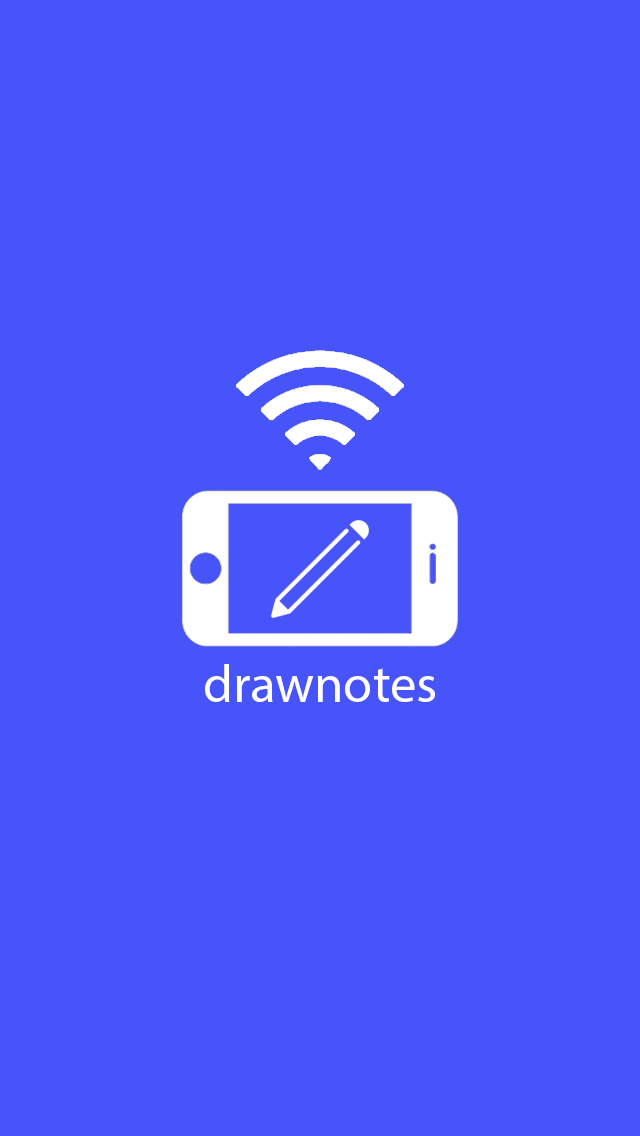
<style>
.page{position:relative;width:640px;height:1136px;background:#4754f9}
.page>*{position:absolute;margin:0}
.t1{font:53px "MyriadPro-Regular";color:#ffffff}
</style>
<div class="page">
<p class="t1" style="left:205px;top:664px;width:230px;height:38px">drawnotes</p>
</div>
